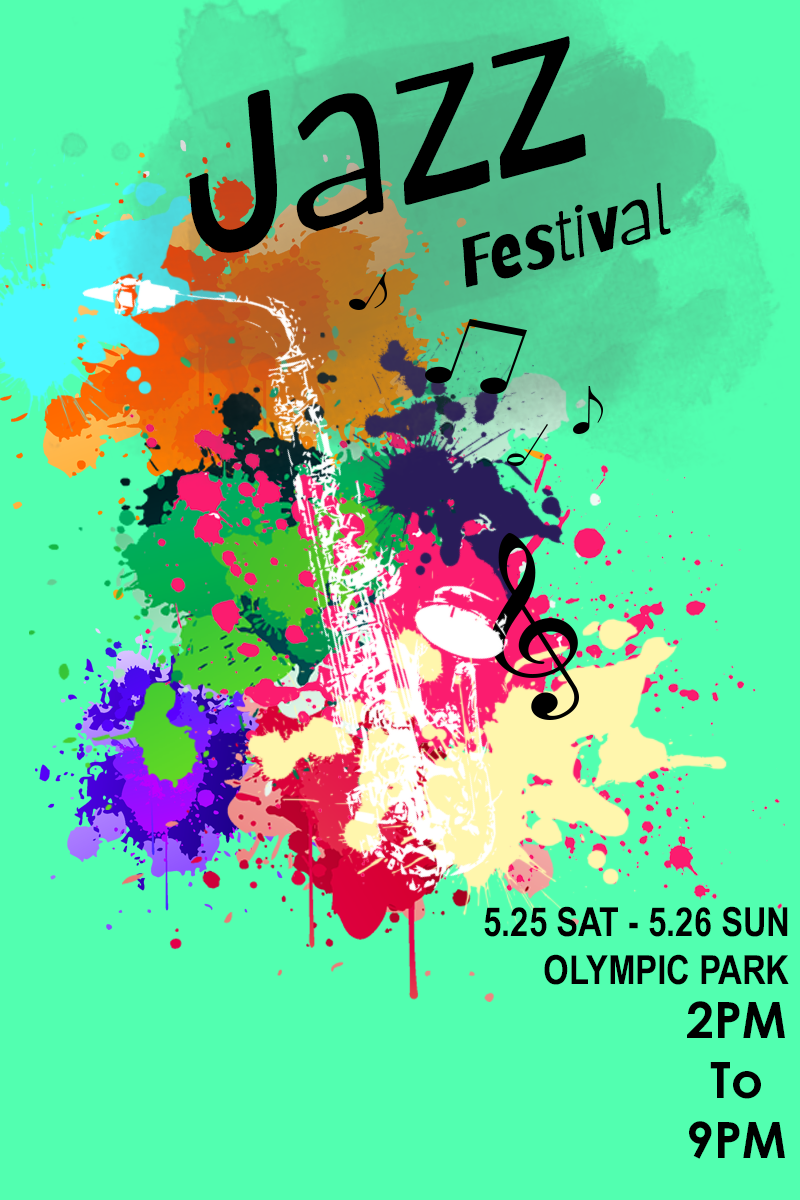
<style>
.page{position:relative;width:800px;height:1200px;background:#52ffb0}
.page>*{position:absolute;margin:0}
.t1{font:207.5px "Barriecito-Regular";color:#000000;font-style:italic}
.t2{font:69.7px "Barriecito-Regular";color:#000000;font-style:italic}
.t3{font:39.9px "ArialNarrow-Bold";color:#000000}
.t4{font:50px "CenturyGothic-Bold";color:#000000}
</style>
<div class="page">
<p class="t1" style="left:189px;top:36px;width:397px;height:217px;rotate:-15deg">Jazz</p>
<p class="t2" style="left:462px;top:182px;width:209px;height:106px;rotate:-15deg">Festival</p>
<p class="t3" style="left:484px;top:906px;width:304px;height:31px">5.25 SAT - 5.26 SUN</p>
<p class="t3" style="left:544px;top:954px;width:245px;height:31px">OLYMPIC PARK</p>
<p class="t4" style="left:687px;top:1001px;width:98px;height:158px;text-align:center">2PM<br>To<br>9PM</p>
</div>
